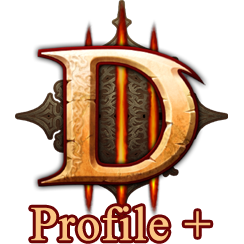
<style>
.page{position:relative;width:244px;height:244px;background:#ffffff}
.page>*{position:absolute;margin:0}
.t1{font:48px "TimesNewRomanPSMT";color:#fac684;font-weight:bold}
</style>
<div class="page">
<p class="t1" style="left:31px;top:206px;width:180px;height:35px">Profile +</p>
</div>
